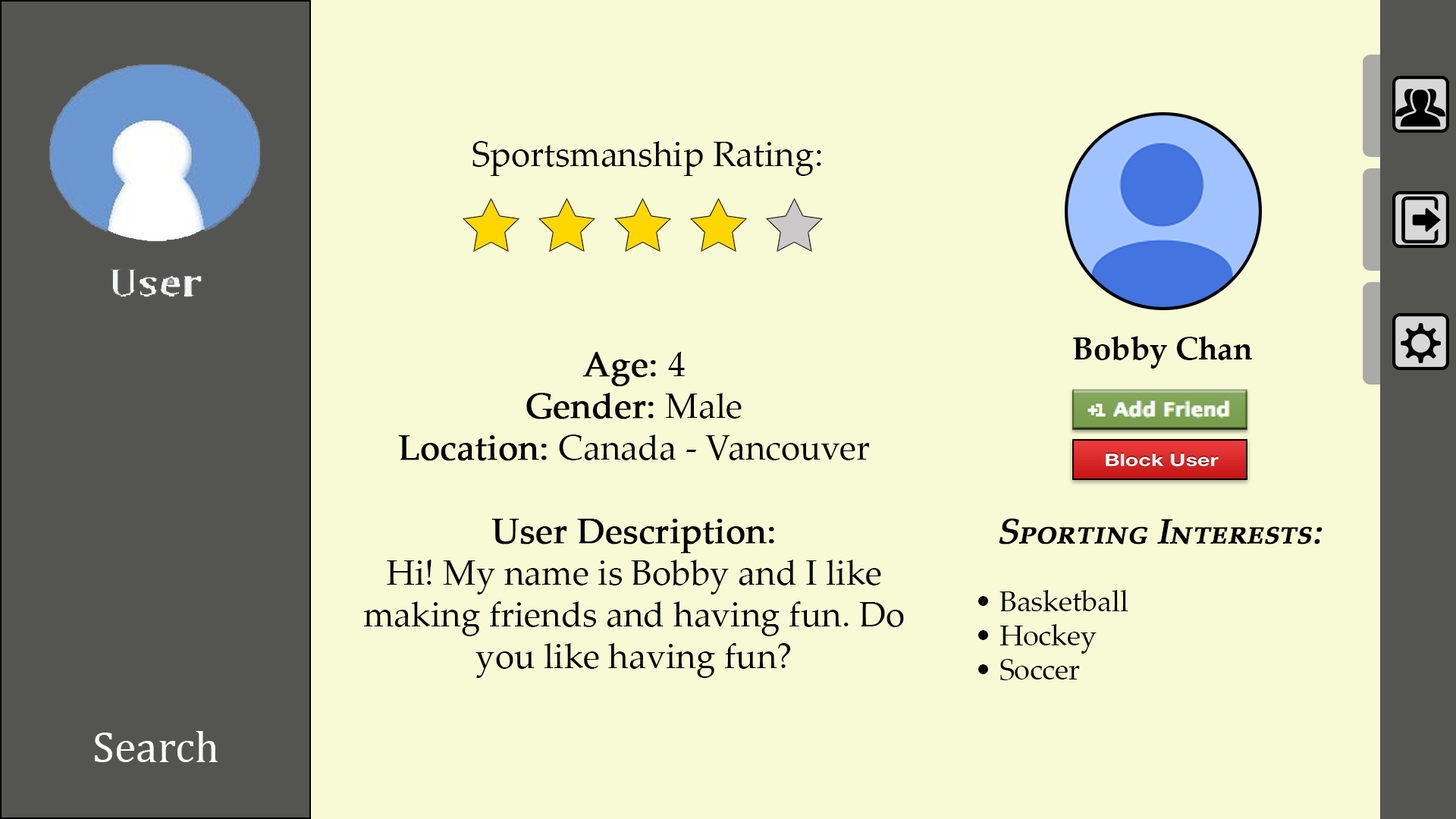
<style>
.page{position:relative;width:1456px;height:819px;background:#f7fad5}
.page>*{position:absolute;margin:0}
.t1{font:34.8px "PalatinoLinotype-Roman";color:#000000}
.t2{font:31.6px "PalatinoLinotype-Bold";color:#000000}
.t3{font:34.8px "PalatinoLinotype-Roman";color:#000000;font-weight:bold}
.t4{font:28.4px "PalatinoLinotype-Roman";color:#000000}
.t5{font:34.8px "PalatinoLinotype-Roman";color:#000000;font-variant:small-caps;font-weight:bold;font-style:italic}
.t6{font:44.2px "Cambria";color:#ffffff}
</style>
<div class="page">
<p class="t1" style="left:472px;top:141px;width:349px;height:35px">Sportsmanship Rating:</p>
<p class="t2" style="left:1073px;top:336px;width:179px;height:33px">Bobby Chan</p>
<p class="t1" style="left:363px;top:352px;width:541px;height:326px;text-align:center"><span class="t3">Age: </span>4<br><span class="t3">Gender: </span>Male<br><span class="t3">Location: </span>Canada - Vancouver<br><br><span class="t3">User Description:<br></span>Hi! My name is Bobby and I like making friends and having fun. Do you like having fun?</p>
<p class="t4" style="left:978px;top:518px;width:344px;height:162px;text-align:center"><span class="t5">Sporting Interests:<br></span><br>• Basketball<br>• Hockey<br>• Soccer</p>
<p class="t6" style="left:95px;top:731px;width:123px;height:31px">Search</p>
</div>
